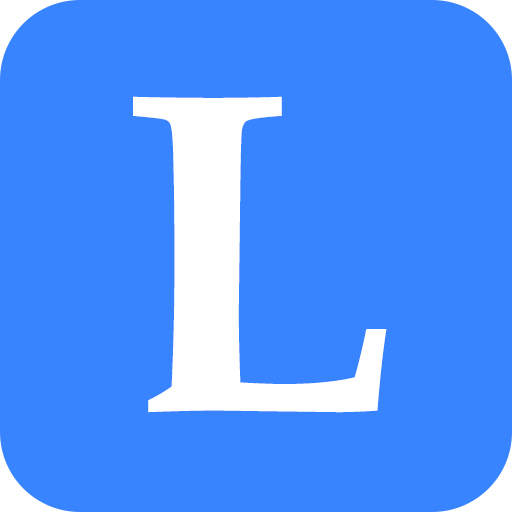
<style>
.page{position:relative;width:512px;height:512px;background:#3884ff}
.page>*{position:absolute;margin:0}
.t1{font:460px "BookAntiqua-Bold";letter-spacing:0.025em;color:#ffffff}
</style>
<div class="page">
<p class="t1" style="left:133px;top:96px;width:254px;height:317px">L</p>
</div>
